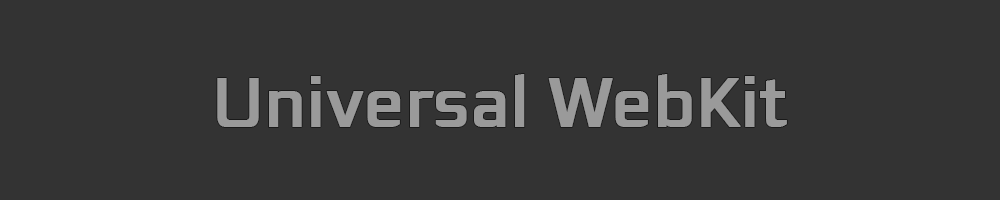
<style>
.page{position:relative;width:1000px;height:200px;background:#333333}
.page>*{position:absolute;margin:0}
.t1{font:72px "EagleSans-Regular";color:#9a9a9a;font-weight:bold}
</style>
<div class="page">
<p class="t1" style="left:217px;top:74px;width:570px;height:53px">Universal WebKit</p>
</div>
